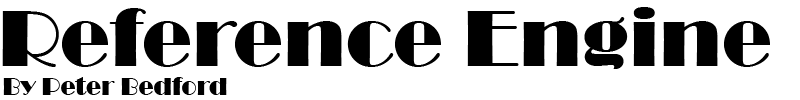
<style>
.page{position:relative;width:800px;height:100px;background:#ffffff}
.page>*{position:absolute;margin:0}
.t1{font:83.3px "Broadway";color:#000000}
.t2{font:25px "Broadway";color:#000000}
</style>
<div class="page">
<p class="t1" style="left:2px;top:7px;width:768px;height:62px">Reference Engine</p>
<p class="t2" style="left:3px;top:77px;width:224px;height:18px">By Peter Bedford</p>
</div>
